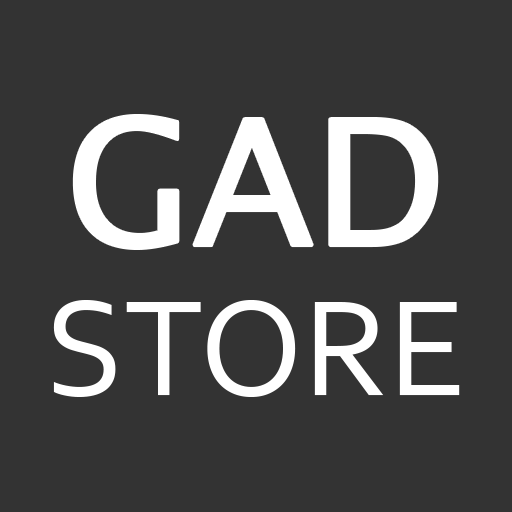
<style>
.page{position:relative;width:512px;height:512px;background:#333333}
.page>*{position:absolute;margin:0}
.t1{font:175.2px "LucidaSansUnicode";color:#ffffff}
.t2{font:142.5px "Corbel";color:#ffffff}
</style>
<div class="page">
<p class="t1" style="left:74px;top:116px;width:363px;height:132px">GAD</p>
<p class="t2" style="left:53px;top:300px;width:407px;height:97px">STORE</p>
</div>
